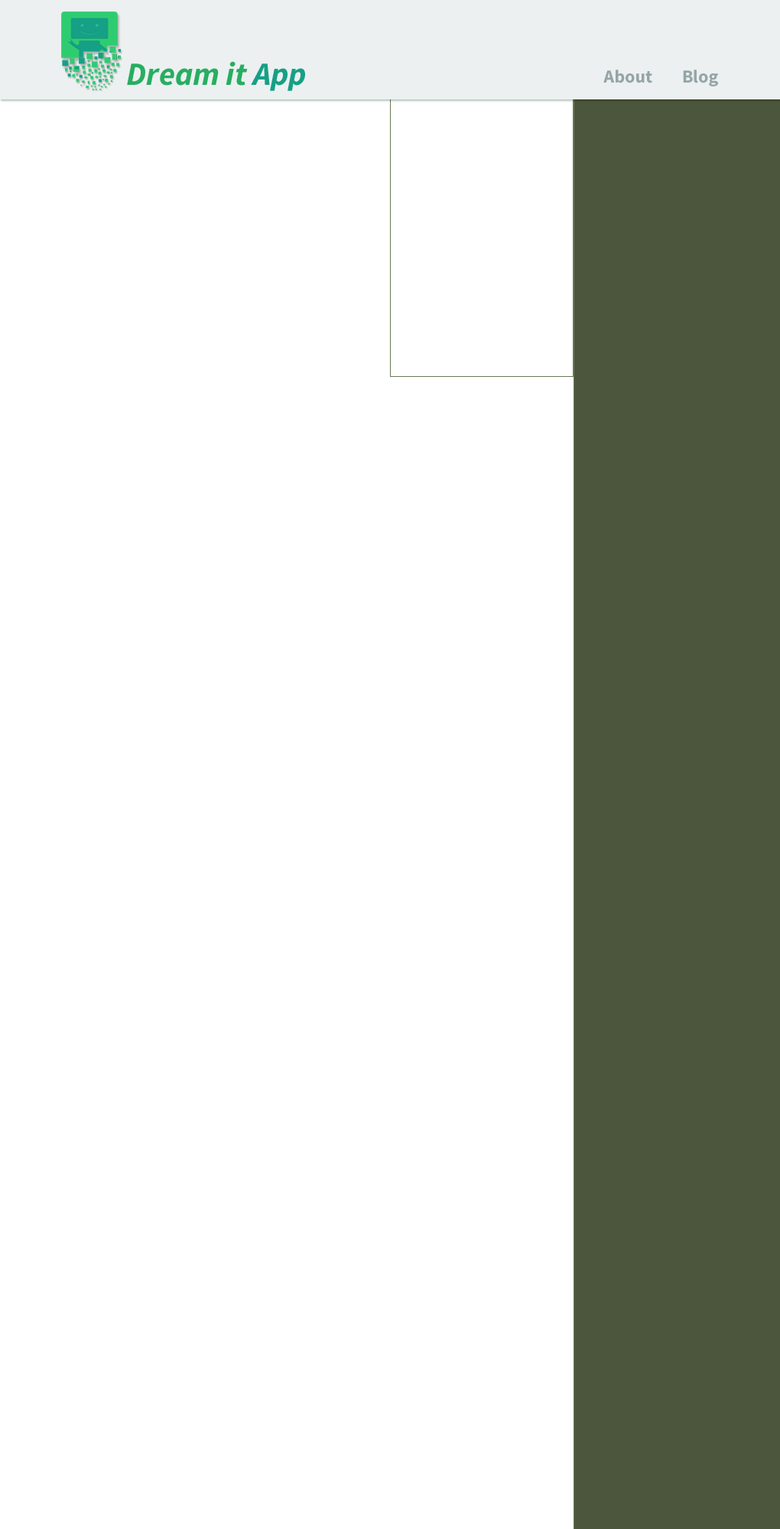
<style>
.page{position:relative;width:780px;height:1529px;background:#ffffff}
.page>*{position:absolute;margin:0}
.t1{font:32.3px "SourceSansPro-BoldIt";color:#27ae60}
.t2{font:32.3px "SourceSansPro-BoldIt";color:#16a085}
.t3{font:18.3px "SourceSansPro-Bold";color:#95a5a6}
</style>
<div class="page">
<p class="t1" style="left:127px;top:61px;width:178px;height:30px">Dream it <span class="t2">App</span></p>
<p class="t3" style="left:603px;top:70px;width:49px;height:13px">About</p>
<p class="t3" style="left:683px;top:70px;width:35px;height:16px">Blog</p>
</div>
